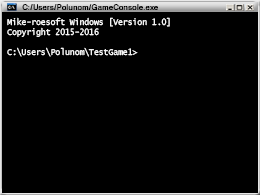
<style>
.page{position:relative;width:260px;height:195px;background:#000000}
.page>*{position:absolute;margin:0}
.t1{font:8px "MS Sans Serif";letter-spacing:0.06em;color:#000000;scale:0.92 1}
.t2{font:9px/10px "LucidaConsole";letter-spacing:-0.02em;color:#ffffff;scale:0.92 1}
</style>
<div class="page">
<p class="t1" style="left:22px;top:4px;width:136px;height:6px">C:/Users/Polunom/GameConsole.exe</p>
<p class="t2" style="left:7px;top:17px;width:163px;height:40px">Mike-roesoft Windows [Version 1.0]<br>Copyright 2015-2016<br><br>C:\Users\Polunom\TestGame1&gt;</p>
</div>
